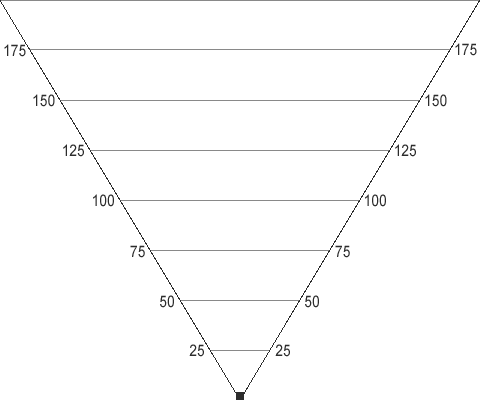
<style>
.page{position:relative;width:480px;height:400px;background:#ffffff}
.page>*{position:absolute;margin:0}
.t1{font:12px "ArialMT";color:#2c2c2c;scale:0.87 1}
.t2{font:16px "ArialMT";color:#2c2c2c;scale:0.87 1}
</style>
<div class="page">
<p class="t1" style="left:4px;top:44px;width:22px;height:13px">175</p>
<p class="t1" style="left:455px;top:43px;width:22px;height:13px">175</p>
<p class="t1" style="left:33px;top:94px;width:22px;height:13px">150</p>
<p class="t1" style="left:425px;top:94px;width:22px;height:13px">150</p>
<p class="t1" style="left:63px;top:144px;width:21px;height:13px">125</p>
<p class="t1" style="left:395px;top:144px;width:21px;height:13px">125</p>
<p class="t1" style="left:93px;top:194px;width:21px;height:13px">100</p>
<p class="t1" style="left:365px;top:194px;width:21px;height:13px">100</p>
<p class="t1" style="left:130px;top:245px;width:15px;height:13px">75</p>
<p class="t1" style="left:335px;top:245px;width:15px;height:13px">75</p>
<p class="t1" style="left:160px;top:295px;width:14px;height:13px">50</p>
<p class="t1" style="left:305px;top:295px;width:14px;height:13px">50</p>
<p class="t2" style="left:189px;top:344px;width:15px;height:13px">25</p>
<p class="t2" style="left:275px;top:344px;width:15px;height:13px">25</p>
</div>
